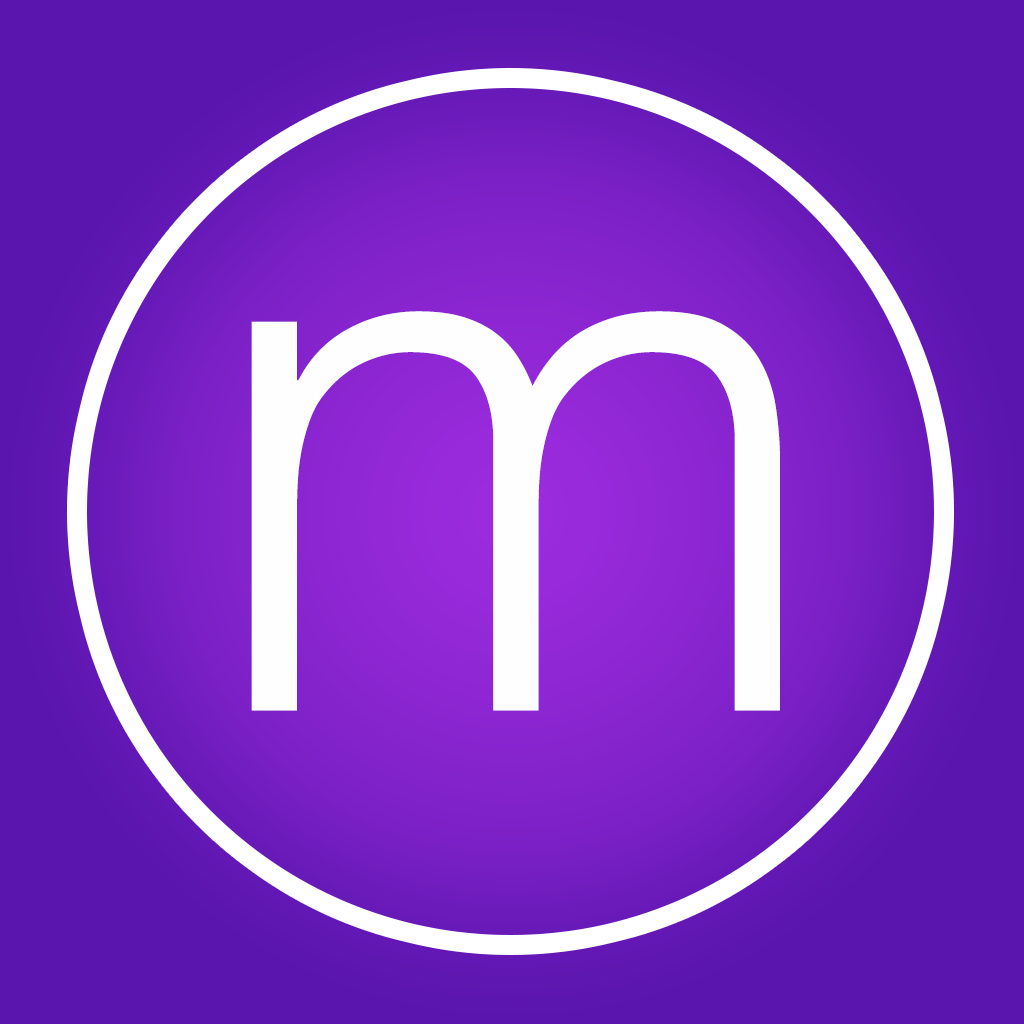
<style>
.page{position:relative;width:1024px;height:1024px;background:#5915ae}
.page>*{position:absolute;margin:0}
.t1{font:750px "Helvetica-Light";letter-spacing:0.004em;color:#fefefe}
</style>
<div class="page">
<p class="t1" style="left:251px;top:311px;width:529px;height:400px">m</p>
</div>
